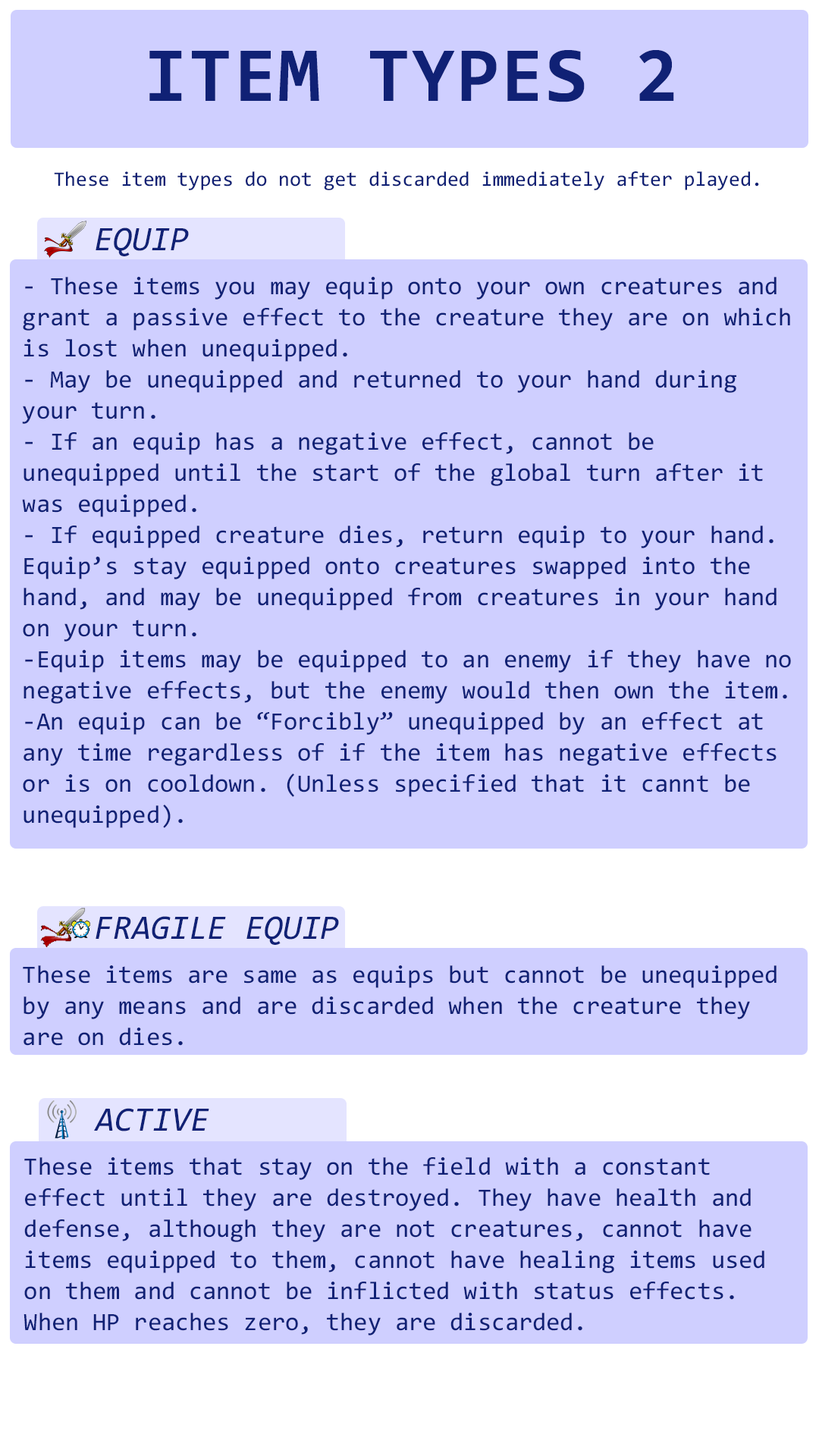
<style>
.page{position:relative;width:819px;height:1456px;background:#cfcfff}
.page>*{position:absolute;margin:0}
.t1{font:78.3px "Consolas-Bold";letter-spacing:0.02em;color:#102175}
.t2{font:20.5px "Consolas";color:#102175}
.t3{font:34.3px "Consolas-Italic";color:#102175}
.t4{font:25px/31.1px "Consolas";color:#102175}
</style>
<div class="page">
<p class="t1" style="left:149px;top:50px;width:525px;height:52px">ITEM TYPES 2</p>
<p class="t2" style="left:54px;top:171px;width:705px;height:19px">These item types do not get discarded immediately after played.</p>
<p class="t3" style="left:96px;top:227px;width:93px;height:29px">EQUIP</p>
<p class="t4" style="left:22px;top:277px;width:769px;height:551px">- These items you may equip onto your own creatures and grant a passive effect to the creature they are on which is lost when unequipped. <br>- May be unequipped and returned to your hand during your turn.<br>- If an equip has a negative effect, cannot be unequipped until the start of the global turn after it was equipped. <br>- If equipped creature dies, return equip to your hand. <br>Equip’s stay equipped onto creatures swapped into the hand, and may be unequipped from creatures in your hand on your turn.<br>-Equip items may be equipped to an enemy if they have no negative effects, but the enemy would then own the item.<br>-An equip can be “Forcibly” unequipped by an effect at any time regardless of if the item has negative effects or is on cooldown. (Unless specified that it cannt be unequipped).</p>
<p class="t3" style="left:96px;top:916px;width:243px;height:29px">FRAGILE EQUIP</p>
<p class="t4" style="left:23px;top:965px;width:754px;height:81px">These items are same as equips but cannot be unequipped by any means and are discarded when the creature they are on dies.</p>
<p class="t3" style="left:94px;top:1108px;width:115px;height:23px">ACTIVE</p>
<p class="t4" style="left:24px;top:1157px;width:740px;height:178px">These items that stay on the field with a constant effect until they are destroyed. They have health and defense, although they are not creatures, cannot have items equipped to them, cannot have healing items used on them and cannot be inflicted with status effects. When HP reaches zero, they are discarded.</p>
</div>
